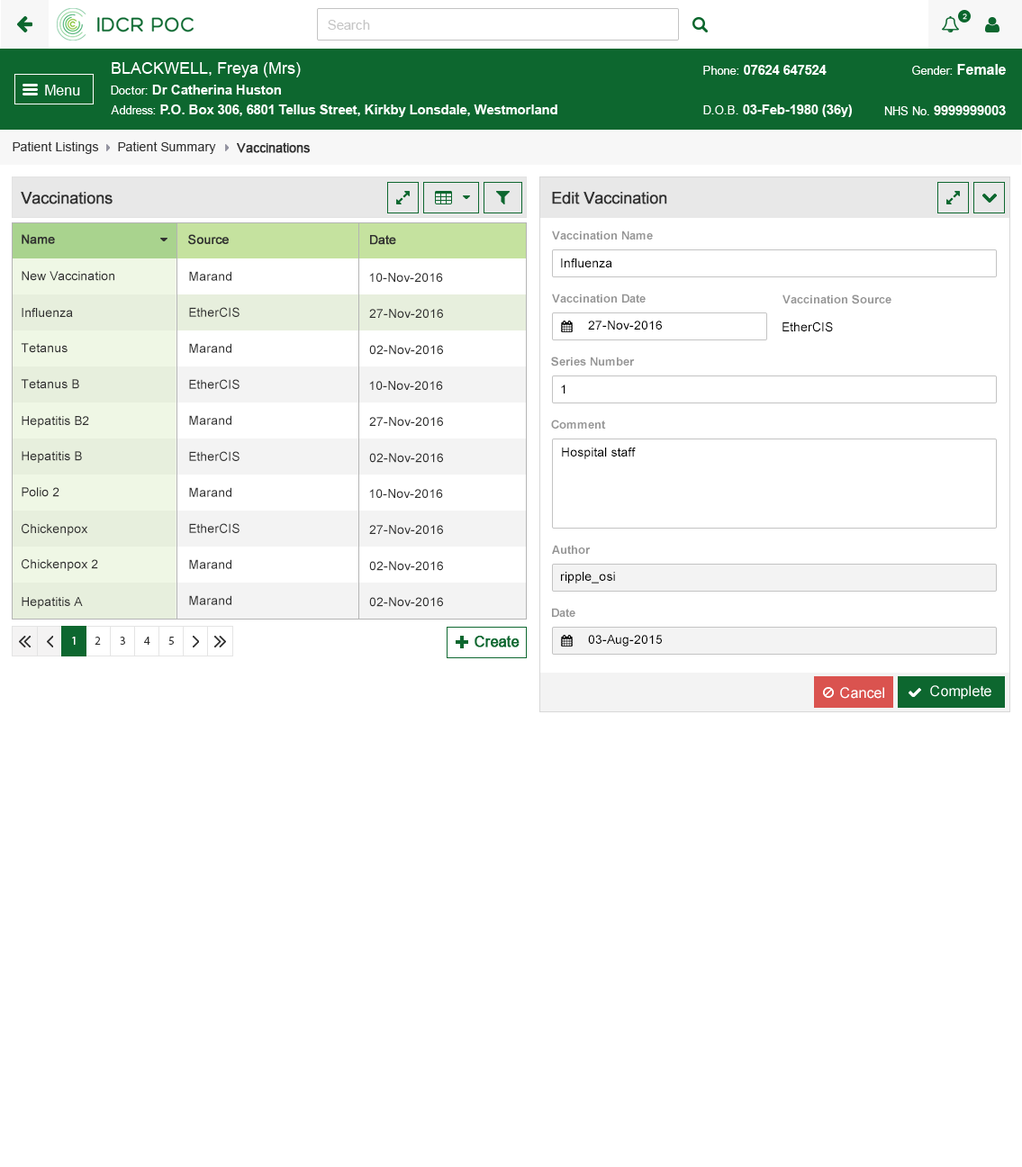
<style>
.page{position:relative;width:1022px;height:1167px;background:#ffffff}
.page>*{position:absolute;margin:0}
.t1{font:12.6px "ArialMT";color:#313131}
.t2{font:12.6px "ArialMT";color:#313131;font-weight:bold}
.t3{font:16.2px "ArialMT";color:#303030;font-weight:bold}
.t4{font:11.7px "Arial-BoldMT";color:#959595}
.t5{font:12.6px "ArialMT";color:#303030;font-weight:bold}
.t6{font:12.6px "ArialMT";color:#000000}
.t7{font:12.6px "ArialMT";color:#303030}
</style>
<div class="page">
<p class="t1" style="left:13px;top:141px;width:86px;height:13px">Patient Listings</p>
<p class="t1" style="left:118px;top:141px;width:98px;height:13px">Patient Summary</p>
<p class="t2" style="left:237px;top:142px;width:73px;height:11px">Vaccinations</p>
<p class="t3" style="left:21px;top:192px;width:92px;height:12px">Vaccinations</p>
<p class="t3" style="left:552px;top:192px;width:115px;height:12px">Edit Vaccination</p>
<p class="t4" style="left:552px;top:230px;width:101px;height:9px">Vaccination Name</p>
<p class="t5" style="left:22px;top:234px;width:33px;height:10px">Name</p>
<p class="t5" style="left:188px;top:234px;width:41px;height:11px">Source</p>
<p class="t5" style="left:370px;top:235px;width:26px;height:10px">Date</p>
<p class="t6" style="left:561px;top:258px;width:51px;height:9px">Influenza</p>
<p class="t7" style="left:22px;top:271px;width:92px;height:10px">New Vaccination</p>
<p class="t7" style="left:189px;top:271px;width:42px;height:10px">Marand</p>
<p class="t7" style="left:369px;top:273px;width:74px;height:9px">10-Nov-2016</p>
<p class="t4" style="left:552px;top:294px;width:94px;height:9px">Vaccination Date</p>
<p class="t4" style="left:782px;top:294px;width:109px;height:10px">Vaccination Source</p>
<p class="t7" style="left:22px;top:308px;width:51px;height:9px">Influenza</p>
<p class="t7" style="left:189px;top:307px;width:50px;height:10px">EtherCIS</p>
<p class="t7" style="left:369px;top:309px;width:74px;height:9px">27-Nov-2016</p>
<p class="t6" style="left:588px;top:321px;width:74px;height:9px">27-Nov-2016</p>
<p class="t6" style="left:782px;top:321px;width:51px;height:11px">EtherCIS</p>
<p class="t7" style="left:21px;top:343px;width:47px;height:10px">Tetanus</p>
<p class="t7" style="left:189px;top:343px;width:42px;height:10px">Marand</p>
<p class="t7" style="left:369px;top:345px;width:74px;height:10px">02-Nov-2016</p>
<p class="t4" style="left:551px;top:357px;width:84px;height:9px">Series Number</p>
<p class="t7" style="left:21px;top:379px;width:58px;height:10px">Tetanus B</p>
<p class="t7" style="left:189px;top:379px;width:50px;height:10px">EtherCIS</p>
<p class="t7" style="left:369px;top:381px;width:74px;height:9px">10-Nov-2016</p>
<p class="t6" style="left:561px;top:384px;width:4px;height:9px">1</p>
<p class="t7" style="left:22px;top:416px;width:67px;height:12px">Hepatitis B2</p>
<p class="t7" style="left:189px;top:415px;width:42px;height:10px">Marand</p>
<p class="t7" style="left:369px;top:417px;width:74px;height:9px">27-Nov-2016</p>
<p class="t4" style="left:551px;top:420px;width:55px;height:9px">Comment</p>
<p class="t6" style="left:562px;top:447px;width:74px;height:12px">Hospital staff</p>
<p class="t7" style="left:22px;top:451px;width:60px;height:12px">Hepatitis B</p>
<p class="t7" style="left:189px;top:451px;width:50px;height:10px">EtherCIS</p>
<p class="t7" style="left:369px;top:453px;width:74px;height:10px">02-Nov-2016</p>
<p class="t7" style="left:22px;top:487px;width:37px;height:10px">Polio 2</p>
<p class="t7" style="left:189px;top:487px;width:42px;height:10px">Marand</p>
<p class="t7" style="left:369px;top:489px;width:74px;height:9px">10-Nov-2016</p>
<p class="t7" style="left:22px;top:523px;width:66px;height:13px">Chickenpox</p>
<p class="t7" style="left:189px;top:523px;width:50px;height:10px">EtherCIS</p>
<p class="t7" style="left:369px;top:525px;width:74px;height:9px">27-Nov-2016</p>
<p class="t4" style="left:552px;top:545px;width:39px;height:9px">Author</p>
<p class="t7" style="left:22px;top:559px;width:76px;height:12px">Chickenpox 2</p>
<p class="t7" style="left:189px;top:559px;width:42px;height:10px">Marand</p>
<p class="t7" style="left:369px;top:561px;width:74px;height:10px">02-Nov-2016</p>
<p class="t6" style="left:561px;top:572px;width:54px;height:11px">ripple_osi</p>
<p class="t7" style="left:22px;top:597px;width:61px;height:12px">Hepatitis A</p>
<p class="t7" style="left:189px;top:595px;width:42px;height:10px">Marand</p>
<p class="t7" style="left:369px;top:597px;width:74px;height:10px">02-Nov-2016</p>
<p class="t4" style="left:552px;top:608px;width:23px;height:9px">Date</p>
<p class="t6" style="left:588px;top:635px;width:74px;height:11px">03-Aug-2015</p>
</div>
